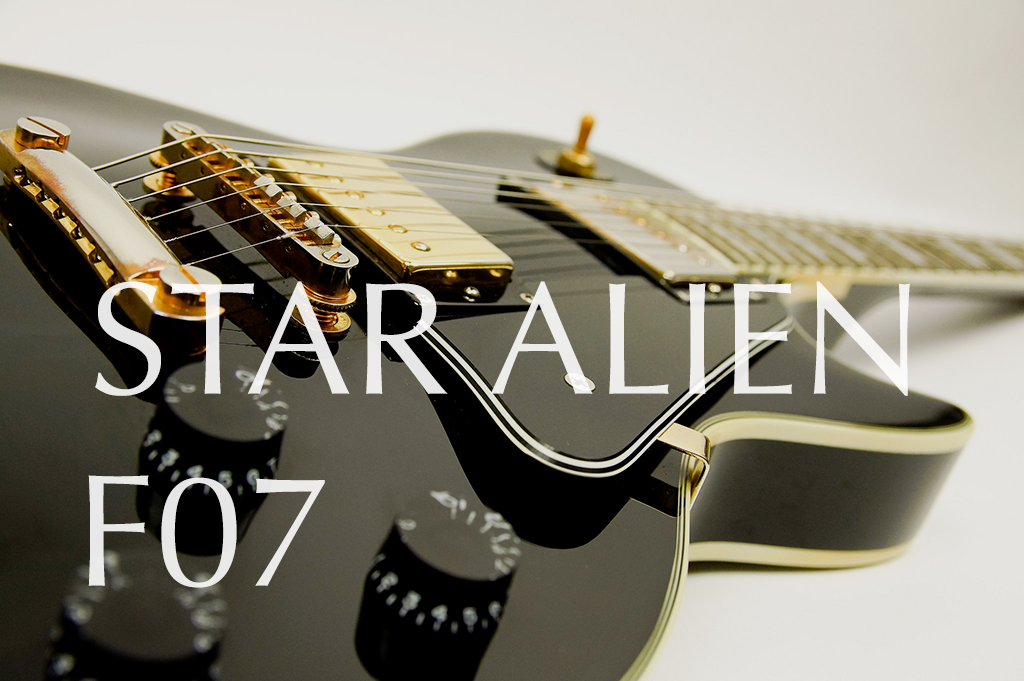
<style>
.page{position:relative;width:1024px;height:681px}
.page>*{position:absolute;margin:0}
.t1{font:160px "Optima-Regular";color:#ffffff}
</style>
<div class="page">
<p class="t1" style="left:88px;top:281px;width:822px;height:307px;text-align:center;opacity:0.85">STAR ALIEN<br>F07</p>
</div>
